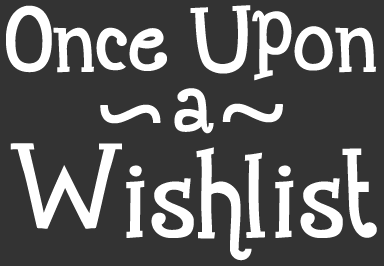
<style>
.page{position:relative;width:384px;height:266px;background:#333333}
.page>*{position:absolute;margin:0}
.t1{font:120px "Maharani";color:#ffffff}
.t2{font:120px "MyriadPro-Regular";color:#ffffff}
.t3{font:154px "Maharani";color:#ffffff}
</style>
<div class="page">
<p class="t1" style="left:174px;top:88px;width:40px;height:46px">a</p>
<p class="t2" style="left:100px;top:104px;width:61px;height:20px;rotate:180deg">~</p>
<p class="t2" style="left:222px;top:103px;width:61px;height:20px">~</p>
<p class="t3" style="left:10px;top:143px;width:367px;height:118px">Wishlist</p>
</div>
